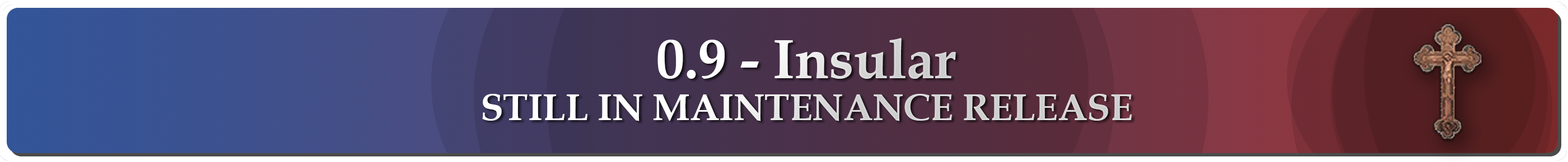
<style>
.page{position:relative;width:1568px;height:162px}
.page>*{position:absolute;margin:0}
.t1{font:37.3px/42px "BookAntiqua-Bold"}
.t2{font:56px "BookAntiqua-Bold"}
</style>
<div class="page">
<p class="t1" style="left:482px;top:38px;width:650px;height:84px;text-align:center"><span class="t2">0.9 - Insular<br></span>STILL IN MAINTENANCE RELEASE</p>
</div>
